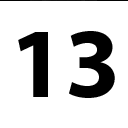
<style>
.page{position:relative;width:128px;height:128px;background:#ffffff}
.page>*{position:absolute;margin:0}
.t1{font:99.7px "MyriadHebrew-Bold";color:#000000}
</style>
<div class="page">
<p class="t1" style="left:18px;top:30px;width:97px;height:67px">13</p>
</div>
